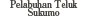
<style>
.page{position:relative;width:88px;height:18px;background:#ffffff}
.page>*{position:absolute;margin:0}
.t1{font:10px/8px "RyuminPro-ExBold";letter-spacing:-0.04em;color:#4c4843;scale:0.9 1}
</style>
<div class="page">
<p class="t1" style="left:10px;top:0px;width:68px;height:16px;text-align:center">Pelabuhan Teluk<br>Sukumo</p>
</div>
